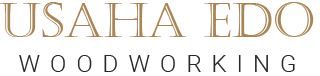
<style>
.page{position:relative;width:320px;height:76px;background:#ffffff}
.page>*{position:absolute;margin:0}
.t1{font:48.3px "Castellar";color:#aa8453}
.t2{font:24.4px "Roboto-Light";letter-spacing:0.4em;color:#282828}
</style>
<div class="page">
<p class="t1" style="left:0px;top:2px;width:314px;height:35px">USAHA EDO</p>
<p class="t2" style="left:19px;top:55px;width:276px;height:17px">WOODWORKING</p>
</div>
